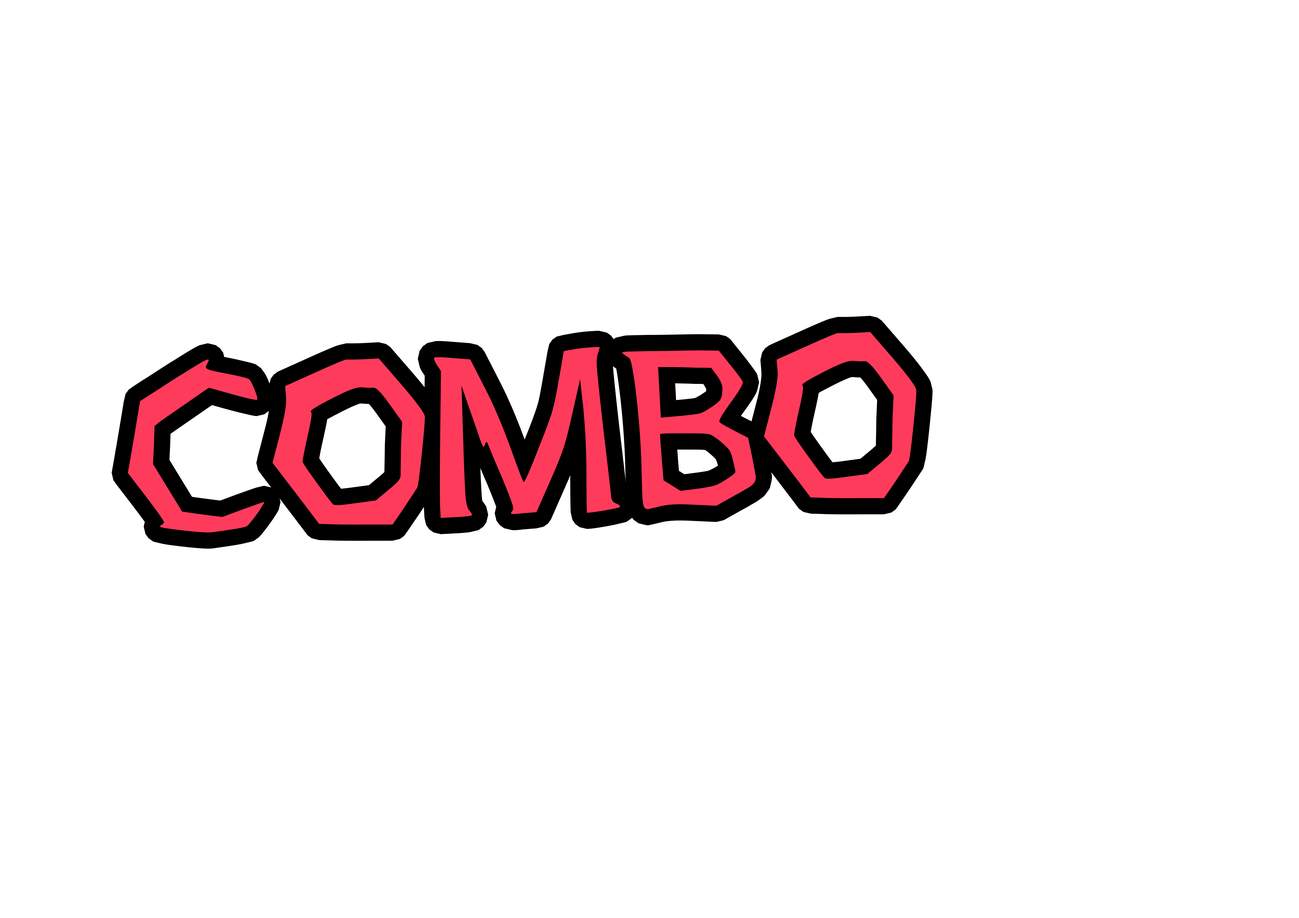
<style>
.page{position:relative;width:1299px;height:918px;background:#ffffff}
.page>*{position:absolute;margin:0}
.t1{font:327.2px "BasebrawlMain-Regular";color:#ff3b5c}
</style>
<div class="page">
<p class="t1" style="left:128px;top:332px;width:788px;height:201px;rotate:-3deg">COMBO</p>
</div>
